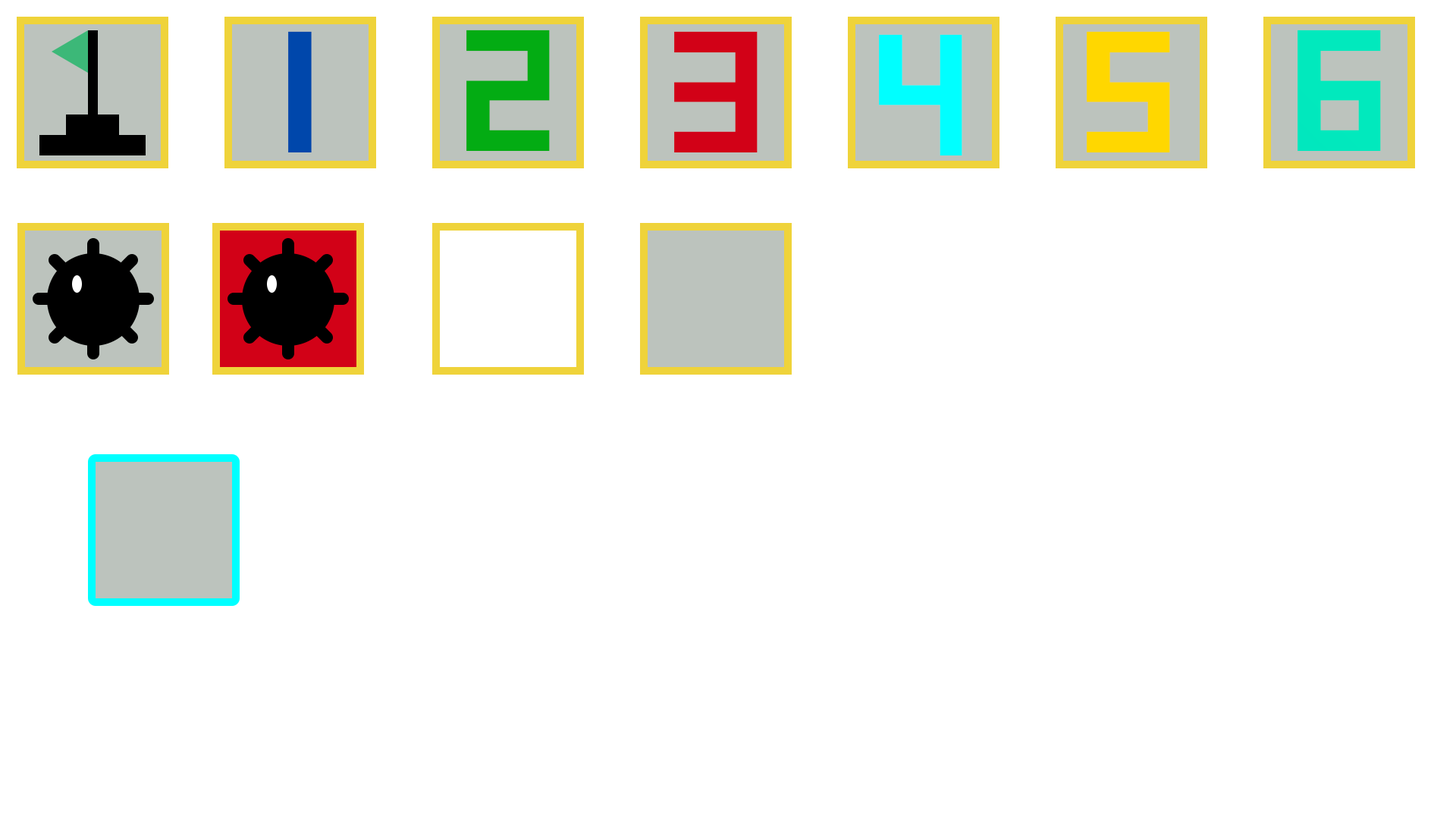
<style>
.page{position:relative;width:1456px;height:819px;background:#ffffff}
.page>*{position:absolute;margin:0}
.t1{font:172.4px "SquareFont";letter-spacing:0.48em;color:#03ac13}
.t2{font:172.4px "SquareFont";letter-spacing:0.48em;color:#01e9bd}
.t3{font:172.4px "SquareFont";letter-spacing:0.48em;color:#0047ab}
.t4{font:172.4px "SquareFont";letter-spacing:0.48em;color:#d20117}
.t5{font:172.4px "SquareFont";letter-spacing:0.48em;color:#00ffff}
.t6{font:172.4px "SquareFont";letter-spacing:0.48em;color:#ffd700}
</style>
<div class="page">
<p class="t1" style="left:466px;top:30px;width:84px;height:121px">2</p>
<p class="t2" style="left:1297px;top:30px;width:84px;height:121px">6</p>
<p class="t3" style="left:288px;top:31px;width:24px;height:121px">1</p>
<p class="t4" style="left:674px;top:31px;width:84px;height:121px">3</p>
<p class="t5" style="left:879px;top:34px;width:83px;height:121px">4</p>
<p class="t6" style="left:1087px;top:31px;width:83px;height:121px">5</p>
</div>
